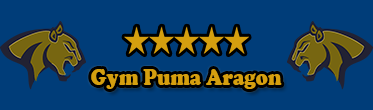
<style>
.page{position:relative;width:373px;height:110px;background:#003d79}
.page>*{position:absolute;margin:0}
.t1{font:23.4px "CooperBlack";color:#d59f0f;scale:0.85 1}
</style>
<div class="page">
<p class="t1" style="left:91px;top:69px;width:191px;height:20px">Gym Puma Aragon</p>
</div>
